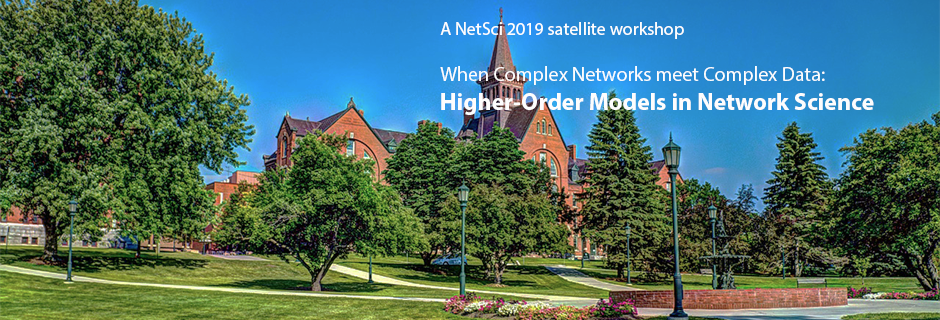
<style>
.page{position:relative;width:940px;height:320px}
.page>*{position:absolute;margin:0}
.t1{font:20px "MyriadPro-Regular";color:#fdfdfd}
.t2{font:18px "MyriadPro-Regular";color:#fdfdfd}
.t3{font:24px "MyriadPro-Bold";color:#fdfdfd}
</style>
<div class="page">
<p class="t1" style="left:440px;top:22px;width:434px;height:93px"><span class="t2">A NetSci 2019 satellite workshop<br><br></span>When Complex Networks meet Complex Data: <br><span class="t3">Higher-Order Models in Network Science</span></p>
</div>
